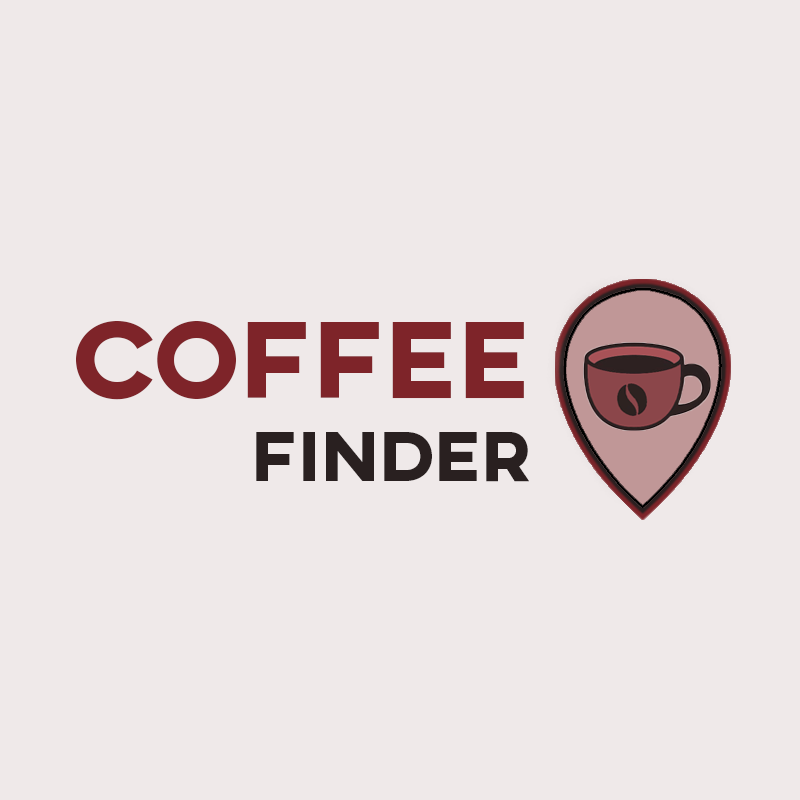
<style>
.page{position:relative;width:800px;height:800px;background:#efe9e9}
.page>*{position:absolute;margin:0}
.t1{font:111.6px "AXIS-ExtraBold";color:#7e2429}
.t2{font:72px "AXIS-ExtraBold";color:#292020}
</style>
<div class="page">
<p class="t1" style="left:76px;top:321px;width:448px;height:79px">COFFeE</p>
<p class="t2" style="left:256px;top:432px;width:273px;height:50px">FINDEr</p>
</div>
